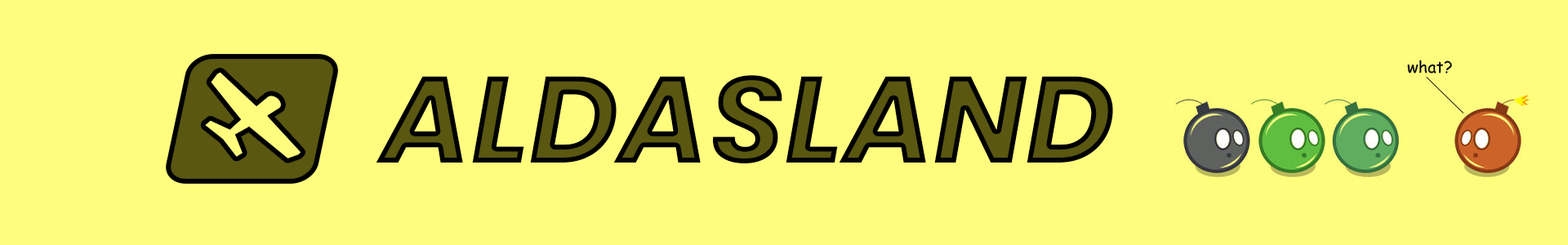
<style>
.page{position:relative;width:1568px;height:245px;background:#fffc7e}
.page>*{position:absolute;margin:0}
.t1{font:122.5px "Poppins-BoldItalic"}
</style>
<div class="page">
<p class="t1" style="left:376px;top:75px;width:737px;height:89px">ALDASLAND</p>
</div>
